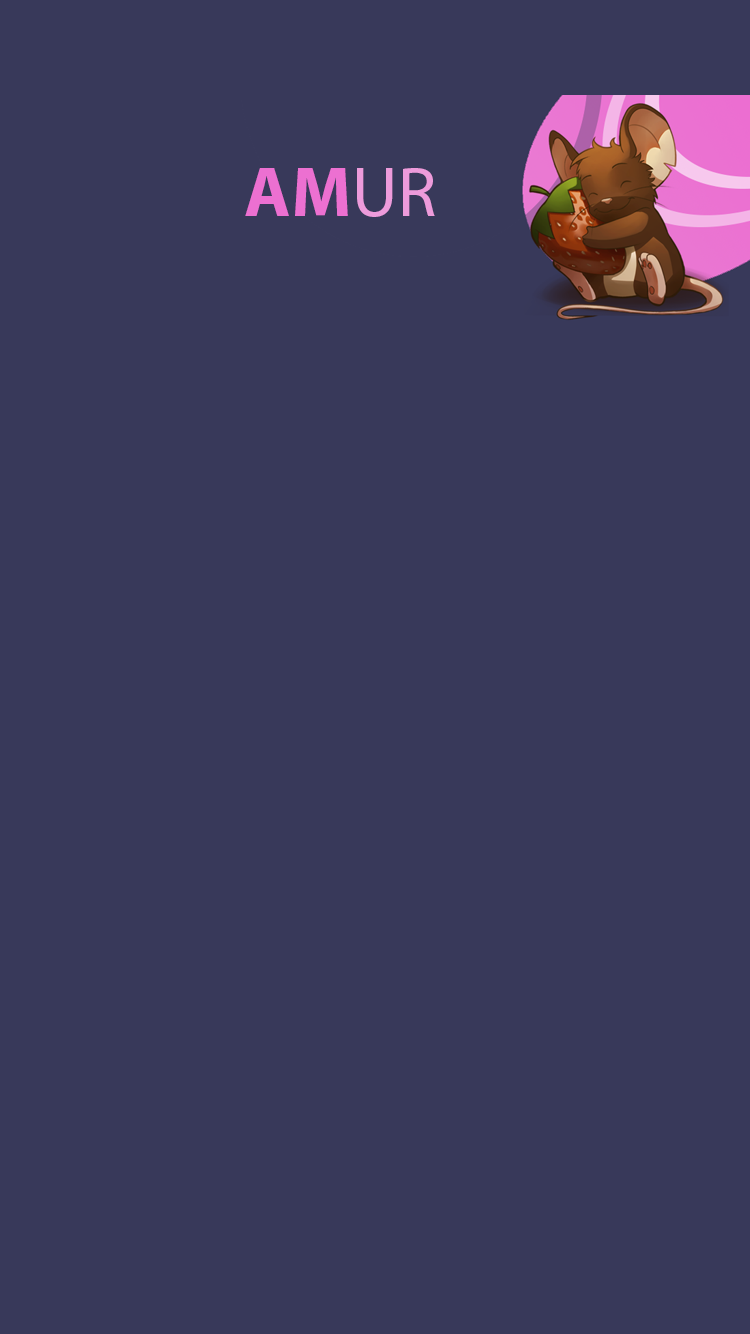
<style>
.page{position:relative;width:750px;height:1334px;background:#38395a}
.page>*{position:absolute;margin:0}
.t1{font:71px "MyriadPro-Bold";letter-spacing:0.01em;color:#ec70d1}
.t2{font:71px "MyriadPro-Regular";letter-spacing:0.01em;color:#ed9bdb}
</style>
<div class="page">
<p class="t1" style="left:245px;top:168px;width:190px;height:49px">AM<span class="t2">UR</span></p>
</div>
